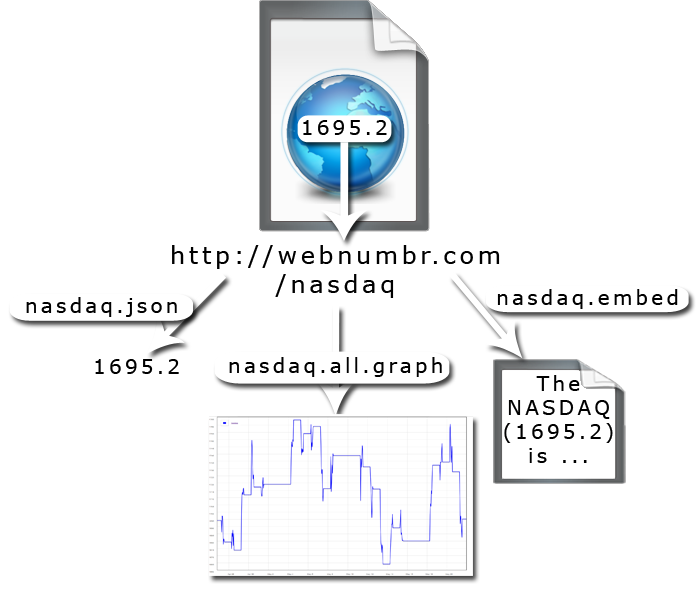
<style>
.page{position:relative;width:700px;height:593px;background:#ffffff}
.page>*{position:absolute;margin:0}
.t1{font:20px "Verdana";letter-spacing:0.16em;color:#000000}
.t2{font:23.7px "Verdana";letter-spacing:0.16em;color:#000000}
</style>
<div class="page">
<p class="t1" style="left:303px;top:120px;width:84px;height:15px">1695.2</p>
<p class="t2" style="left:172px;top:245px;width:328px;height:53px;text-align:center">http://webnumbr.com/nasdaq</p>
<p class="t1" style="left:497px;top:289px;width:181px;height:20px">nasdaq.embed</p>
<p class="t1" style="left:26px;top:297px;width:151px;height:20px">nasdaq.json</p>
<p class="t1" style="left:95px;top:359px;width:84px;height:15px">1695.2</p>
<p class="t1" style="left:229px;top:357px;width:213px;height:20px">nasdaq.all.graph</p>
<p class="t1" style="left:504px;top:375px;width:109px;height:88px;text-align:center">The NASDAQ (1695.2) <br>is ...</p>
</div>
